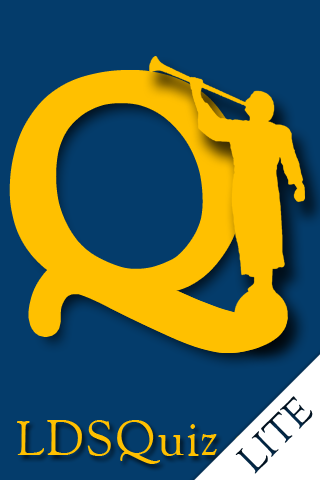
<style>
.page{position:relative;width:320px;height:480px;background:#043c6b}
.page>*{position:absolute;margin:0}
.t1{font:287.4px "OFLGoudyStMTT";color:#ffc000}
.t2{font:38.6px "OFLGoudyStMTT"}
.t3{font:48px "OFLGoudyStMTT";letter-spacing:0.025em;color:#ffc000}
</style>
<div class="page">
<p class="t1" style="left:19px;top:80px;width:258px;height:263px">Q</p>
<p class="t2" style="left:235px;top:396px;width:78px;height:78px;rotate:-45deg">LITE</p>
<p class="t3" style="left:17px;top:420px;width:284px;height:45px">LDSQuiz.org</p>
</div>
